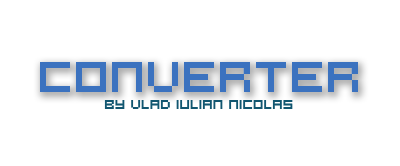
<style>
.page{position:relative;width:400px;height:166px;background:#ffffff}
.page>*{position:absolute;margin:0}
.t1{font:48px "Hooge0553";color:#3b72bf}
.t2{font:14px "Hooge0553";color:#115670}
</style>
<div class="page">
<p class="t1" style="left:40px;top:62px;width:318px;height:30px">converter</p>
<p class="t2" style="left:104px;top:100px;width:189px;height:9px">by vlad iulian nicolas</p>
</div>
